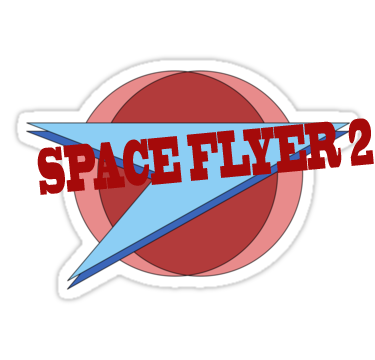
<style>
.page{position:relative;width:375px;height:360px;background:#ffffff}
.page>*{position:absolute;margin:0}
.t1{font:61.9px "BlackoakStd";color:#a50a0a;scale:0.28 1}
</style>
<div class="page">
<p class="t1" style="left:37px;top:118px;width:337px;height:77px;rotate:-5deg">SPACE FLYER 2</p>
</div>
